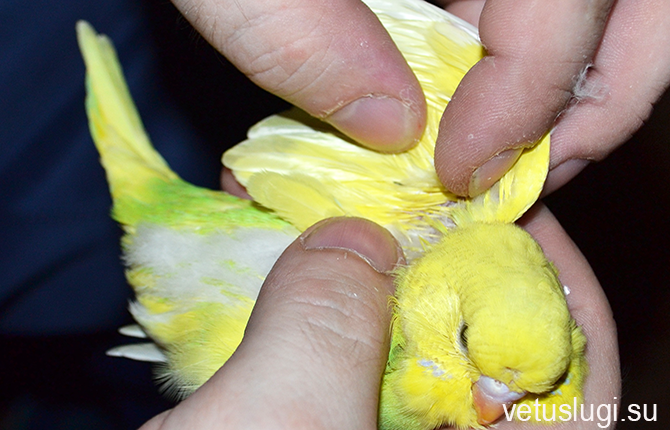
<style>
.page{position:relative;width:670px;height:430px}
.page>*{position:absolute;margin:0}
.t1{font:33.4px "ArialNarrow";letter-spacing:0.002em;color:#f9f3f3;scale:1.07 1}
</style>
<div class="page">
<p class="t1" style="left:502px;top:397px;width:155px;height:31px">vetuslugi.su</p>
</div>
